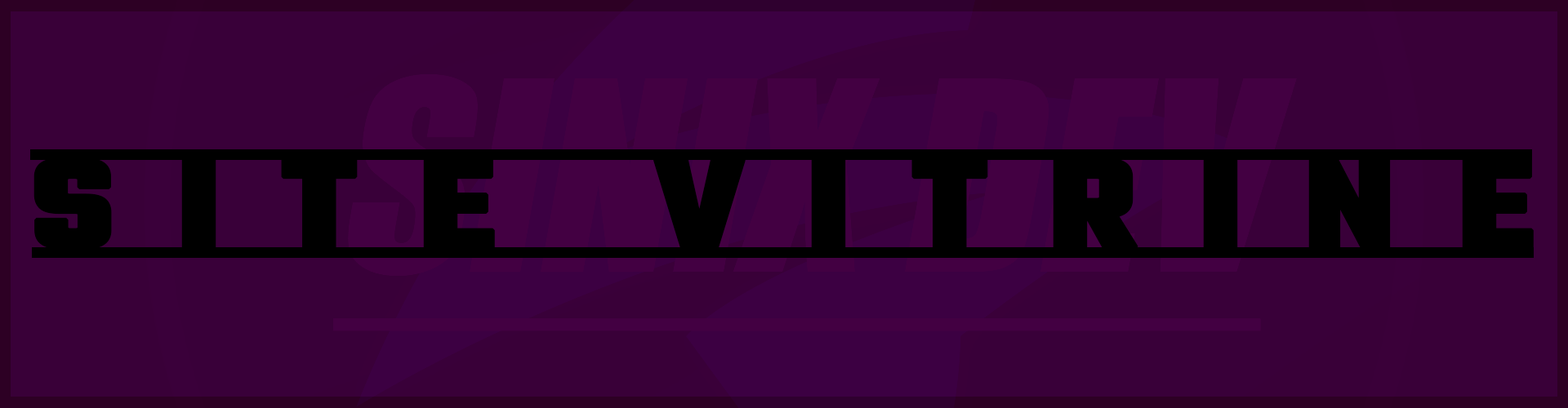
<style>
.page{position:relative;width:1568px;height:408px;background:#390039}
.page>*{position:absolute;margin:0}
.t1{font:136.1px "Teko-Bold";letter-spacing:0.34em;color:#000000;text-transform:uppercase;font-weight:bold;scale:1.25 1}
</style>
<div class="page">
<p class="t1" style="left:33px;top:158px;width:1501px;height:92px">Site Vitrine</p>
</div>
